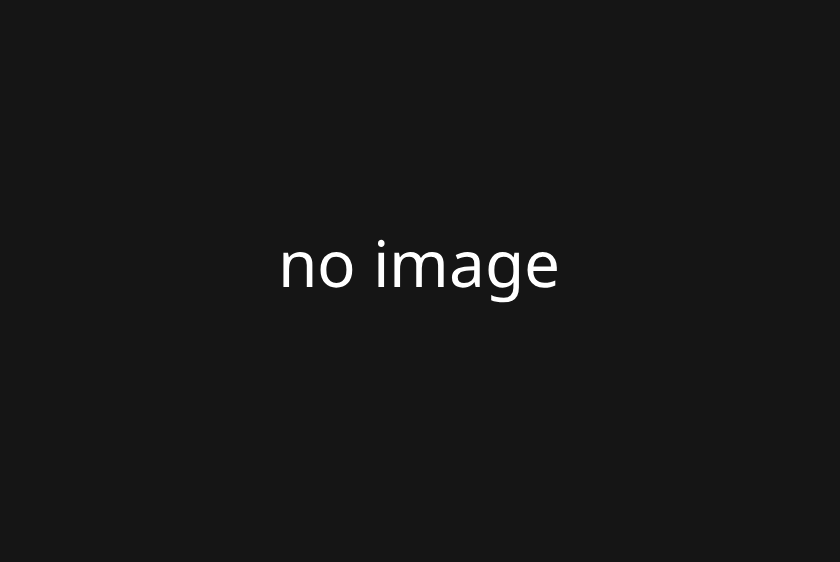
<style>
.page{position:relative;width:840px;height:562px;background:#151515}
.page>*{position:absolute;margin:0}
.t1{font:64px "NotoSans-Regular";color:#ffffff}
</style>
<div class="page">
<p class="t1" style="left:283px;top:239px;width:274px;height:64px">no image</p>
</div>
